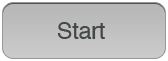
<style>
.page{position:relative;width:168px;height:61px}
.page>*{position:absolute;margin:0}
.t1{font:23.4px "Helvetica";letter-spacing:-0.01em;color:#454848}
</style>
<div class="page">
<p class="t1" style="left:57px;top:22px;width:48px;height:17px">Start</p>
</div>
